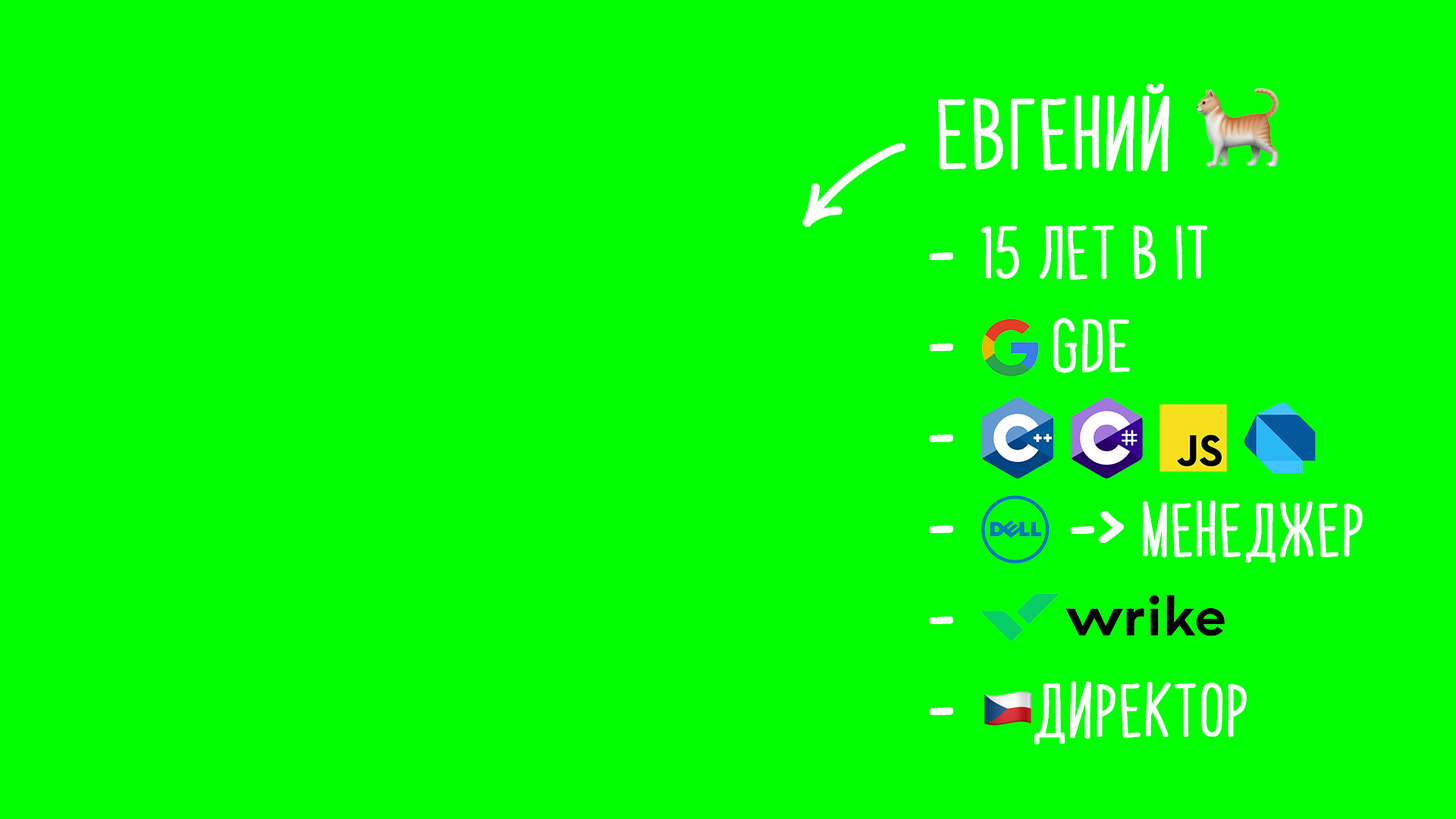
<style>
.page{position:relative;width:1456px;height:819px;background:#00ff00}
.page>*{position:absolute;margin:0}
.t1{font:60.6px "PapayaSunrise";color:#ffffff;font-weight:bold}
.t2{font:83.4px "AppleColorEmoji";color:#ffffff;font-weight:bold}
.t3{font:97.3px "PWNewArrows";color:#ffffff;font-weight:bold}
.t4{font:45.5px "PapayaSunrise";color:#ffffff;font-weight:bold}
.t5{font:75.8px "ComicSansMS";color:#ffffff;font-weight:bold}
.t6{font:68.2px/91px "ComicSansMS";color:#ffffff;font-weight:bold}
.t7{font:68.2px "ComicSansMS";color:#ffffff;font-weight:bold}
</style>
<div class="page">
<p class="t1" style="left:938px;top:83px;width:341px;height:88px">Евгений <span class="t2">🐈</span></p>
<p class="t3" style="left:802px;top:143px;width:103px;height:84px;rotate:99deg">u</p>
<p class="t4" style="left:981px;top:225px;width:226px;height:55px"><span class="t5"> </span>15 лет в IT</p>
<p class="t6" style="left:929px;top:253px;width:24px;height:462px;text-align:center">-<br>-<br>-<br>-<br>-<br>-</p>
<p class="t4" style="left:1053px;top:318px;width:77px;height:55px"><span class="t5"> </span>GDE</p>
<p class="t4" style="left:1143px;top:500px;width:220px;height:63px">менеджер</p>
<p class="t7" style="left:1070px;top:511px;width:54px;height:32px">-&gt;</p>
</div>
